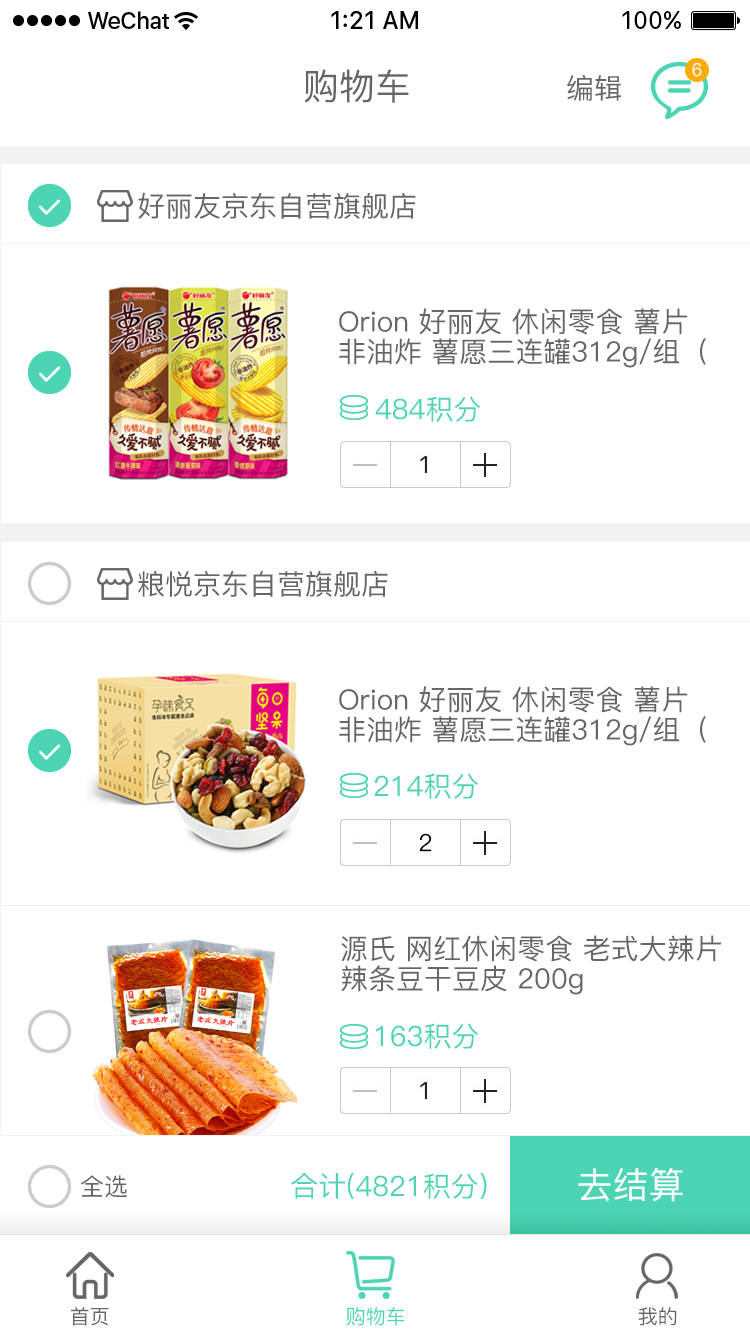
<style>
.page{position:relative;width:750px;height:1334px;background:#ffffff}
.page>*{position:absolute;margin:0}
.t1{font:18px "PingFang-SC-Medium";color:#ffffff}
.t2{font:36px "PingFang-SC-Medium";color:#666666}
.t3{font:28px "PingFang-SC-Medium";color:#666666}
.t4{font:28px/30px "PingFang-SC-Medium";color:#666666}
.t5{font:28px "PingFang-SC-Medium";color:#4cd4b4}
.t6{font:24px "PingFang-SC-Medium";color:#000000}
.t7{font:36px "PingFang-SC-Medium";color:#ffffff}
.t8{font:24px "PingFang-SC-Medium";color:#666666}
.t9{font:20px "PingFang-SC-Medium";color:#666666}
.t10{font:20px "PingFang-SC-Medium";color:#4cd4b4}
</style>
<div class="page">
<p class="t1" style="left:692px;top:63px;width:10px;height:14px">6</p>
<p class="t2" style="left:304px;top:69px;width:105px;height:34px">购物车</p>
<p class="t3" style="left:567px;top:75px;width:54px;height:26px">编辑</p>
<p class="t3" style="left:138px;top:192px;width:278px;height:27px">好丽友京东自营旗舰店</p>
<p class="t4" style="left:339px;top:308px;width:367px;height:60px">Orion 好丽友 休闲零食 薯片 非油炸 薯愿三连罐312g/组（104g*3薯片）</p>
<p class="t5" style="left:375px;top:396px;width:105px;height:26px">484积分</p>
<p class="t3" style="left:138px;top:571px;width:250px;height:26px">粮悦京东自营旗舰店</p>
<p class="t4" style="left:339px;top:686px;width:367px;height:60px">Orion 好丽友 休闲零食 薯片 非油炸 薯愿三连罐312g/组（104g*3薯片）</p>
<p class="t5" style="left:374px;top:773px;width:104px;height:26px">214积分</p>
<p class="t6" style="left:419px;top:833px;width:13px;height:19px">2</p>
<p class="t4" style="left:341px;top:935px;width:380px;height:60px">源氏 网红休闲零食 老式大辣片 辣条豆干豆皮 200g</p>
<p class="t5" style="left:376px;top:1023px;width:102px;height:26px">163积分</p>
<p class="t7" style="left:578px;top:1167px;width:105px;height:35px">去结算</p>
<p class="t8" style="left:81px;top:1175px;width:46px;height:23px">全选</p>
<p class="t5" style="left:291px;top:1172px;width:196px;height:27px">合计(4821积分)</p>
<p class="t9" style="left:71px;top:1307px;width:38px;height:19px">首页</p>
<p class="t10" style="left:346px;top:1307px;width:59px;height:19px">购物车</p>
<p class="t9" style="left:638px;top:1307px;width:39px;height:19px">我的</p>
</div>
